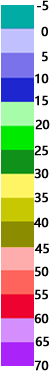
<style>
.page{position:relative;width:50px;height:371px;background:#ffffff}
.page>*{position:absolute;margin:0}
.t1{font:12px "MicrosoftYaHei";color:#000000;font-weight:bold}
</style>
<div class="page">
<p class="t1" style="left:37px;top:0px;width:12px;height:11px">-5</p>
<p class="t1" style="left:41px;top:26px;width:7px;height:11px">0</p>
<p class="t1" style="left:42px;top:51px;width:6px;height:11px">5</p>
<p class="t1" style="left:35px;top:73px;width:14px;height:11px">10</p>
<p class="t1" style="left:35px;top:95px;width:13px;height:11px">15</p>
<p class="t1" style="left:35px;top:119px;width:15px;height:11px">20</p>
<p class="t1" style="left:34px;top:145px;width:14px;height:11px">25</p>
<p class="t1" style="left:34px;top:168px;width:15px;height:11px">30</p>
<p class="t1" style="left:34px;top:192px;width:14px;height:11px">35</p>
<p class="t1" style="left:34px;top:217px;width:15px;height:11px">40</p>
<p class="t1" style="left:35px;top:243px;width:14px;height:11px">45</p>
<p class="t1" style="left:35px;top:266px;width:14px;height:11px">50</p>
<p class="t1" style="left:35px;top:289px;width:13px;height:11px">55</p>
<p class="t1" style="left:34px;top:313px;width:15px;height:11px">60</p>
<p class="t1" style="left:35px;top:336px;width:14px;height:11px">65</p>
<p class="t1" style="left:34px;top:360px;width:15px;height:11px">70</p>
</div>
